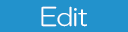
<style>
.page{position:relative;width:128px;height:32px;background:#2292cc}
.page>*{position:absolute;margin:0}
.t1{font:24px "HGMaruGothicMPRO";color:#ffffff}
</style>
<div class="page">
<p class="t1" style="left:41px;top:6px;width:46px;height:21px">Edit</p>
</div>
